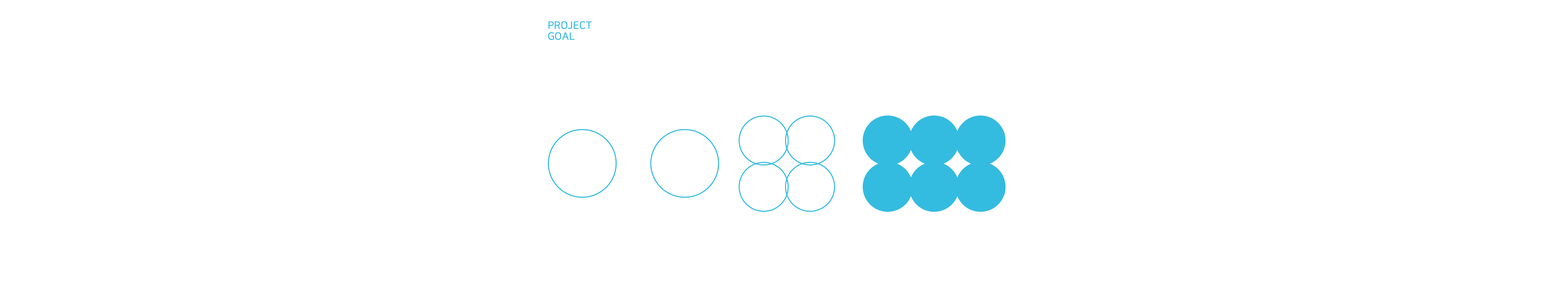
<style>
.page{position:relative;width:1568px;height:281px;background:#ffffff}
.page>*{position:absolute;margin:0}
.t1{font:10.4px/10.9px "NanumSquareB";color:#34bbe0;text-transform:uppercase}
</style>
<div class="page">
<p class="t1" style="left:548px;top:21px;width:44px;height:19px">PROJECT<br>GOAL</p>
</div>
